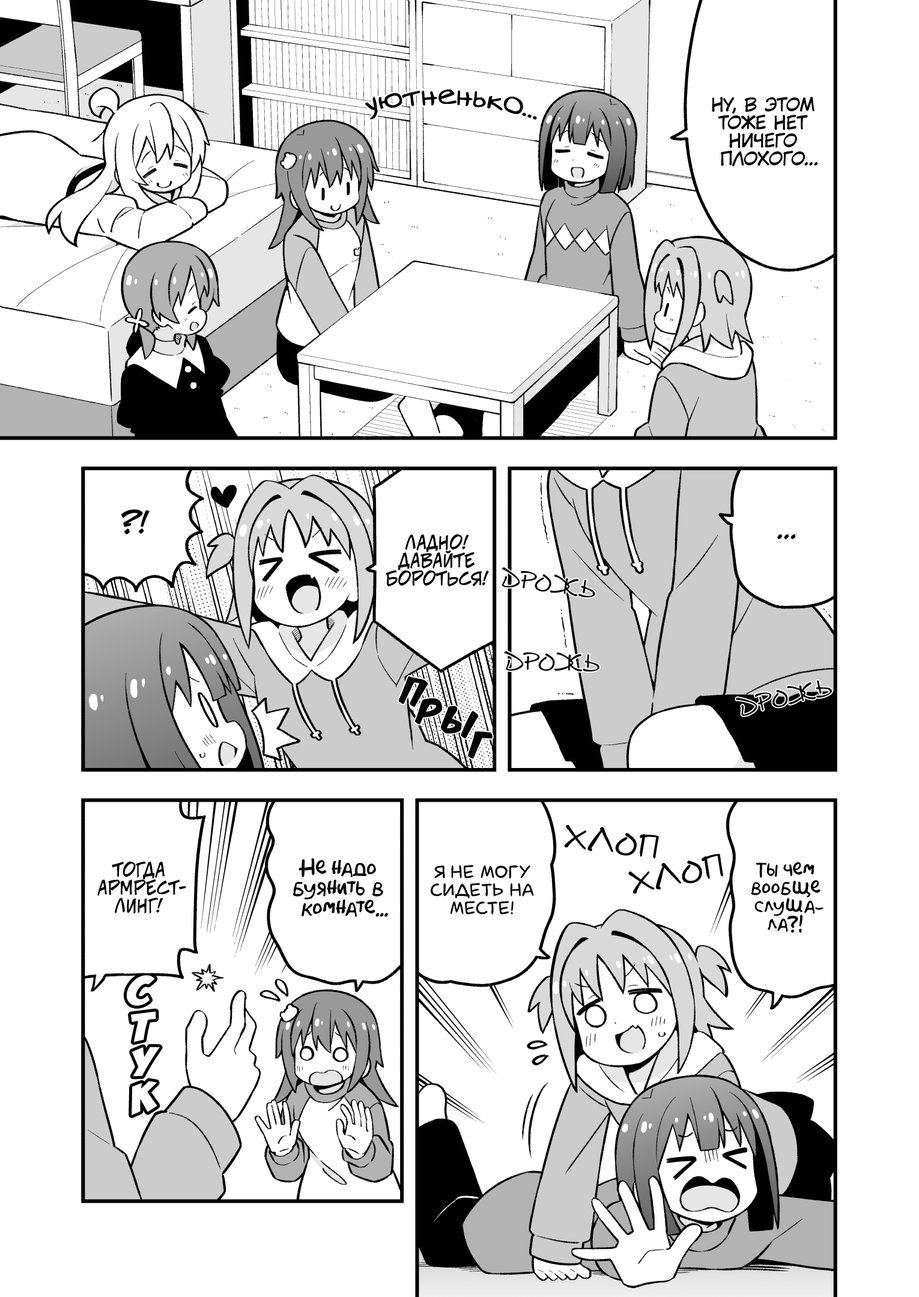
<style>
.page{position:relative;width:919px;height:1297px;background:#ffffff}
.page>*{position:absolute;margin:0}
.t1{font:28.8px "v_Augie";color:#000000}
.t2{font:18px "KuraiVoice2";color:#000000;text-transform:uppercase}
.t3{font:28.8px "v_CCJeffCampbell";color:#000000;text-transform:uppercase}
.t4{font:18px "v_CCJeffCampbell";color:#000000;text-transform:uppercase}
.t5{font:25.2px "KuraiVoice2";color:#000000;text-transform:uppercase}
.t6{font:25.2px "DSNote";color:#000000}
.t7{font:32.4px "KomikaTitle-AxisRUS-LAT";color:#000000}
.t8{font:32.4px "DSNote";color:#000000;font-weight:bold}
.t9{font:19.8px "AkbarPlain";color:#000000}
.t10{font:18px "laCartoonerie";color:#000000;text-transform:uppercase}
.t11{font:18px "AkbarPlain";color:#000000}
.t12{font:43.2px "BadaBoom";color:#ffffff;scale:1.5 1}
</style>
<div class="page">
<p class="t1" style="left:365px;top:90px;width:172px;height:30px;rotate:2deg">уютненько...</p>
<p class="t2" style="left:712px;top:97px;width:106px;height:69px;text-align:center">Ну, в этом<br>тоже нет<br>ничего<br>плохого...</p>
<p class="t3" style="left:121px;top:509px;width:29px;height:26px">?!</p>
<p class="t4" style="left:386px;top:535px;width:103px;height:52px;text-align:center">Ладно!<br>Давайте<br>бороться!</p>
<p class="t5" style="left:777px;top:534px;width:19px;height:5px">...</p>
<p class="t6" style="left:502px;top:568px;width:93px;height:30px;rotate:8deg">дрожь</p>
<p class="t6" style="left:504px;top:651px;width:95px;height:21px;rotate:2deg">дрожь</p>
<p class="t7" style="left:398px;top:676px;width:30px;height:32px;rotate:14deg">п</p>
<p class="t7" style="left:415px;top:699px;width:27px;height:26px;rotate:14deg">р</p>
<p class="t7" style="left:441px;top:706px;width:38px;height:33px;rotate:16deg">ы</p>
<p class="t7" style="left:468px;top:732px;width:25px;height:27px;rotate:10deg">г</p>
<p class="t8" style="left:564px;top:825px;width:95px;height:34px;rotate:7deg">хлоп</p>
<p class="t8" style="left:628px;top:854px;width:95px;height:40px;rotate:-11deg">хлоп</p>
<p class="t4" style="left:97px;top:862px;width:89px;height:52px;text-align:center">Тогда<br>армрест-<br>линг!</p>
<p class="t9" style="left:293px;top:858px;width:95px;height:59px;text-align:center">Не надо<br>буянить в<br>комнате...</p>
<p class="t10" style="left:431px;top:865px;width:103px;height:50px;text-align:center">Я не могу<br>сидеть на<br>месте!</p>
<p class="t11" style="left:751px;top:863px;width:73px;height:70px;text-align:center">Ты чем<br>вообще<br>слуша-<br>ла?!</p>
<p class="t12" style="left:127px;top:976px;width:28px;height:30px;rotate:-6deg">с</p>
<p class="t12" style="left:131px;top:1012px;width:25px;height:31px;rotate:-3deg">т</p>
<p class="t12" style="left:132px;top:1047px;width:28px;height:30px;rotate:-5deg">у</p>
<p class="t12" style="left:132px;top:1081px;width:25px;height:34px;rotate:-13deg">к</p>
</div>
